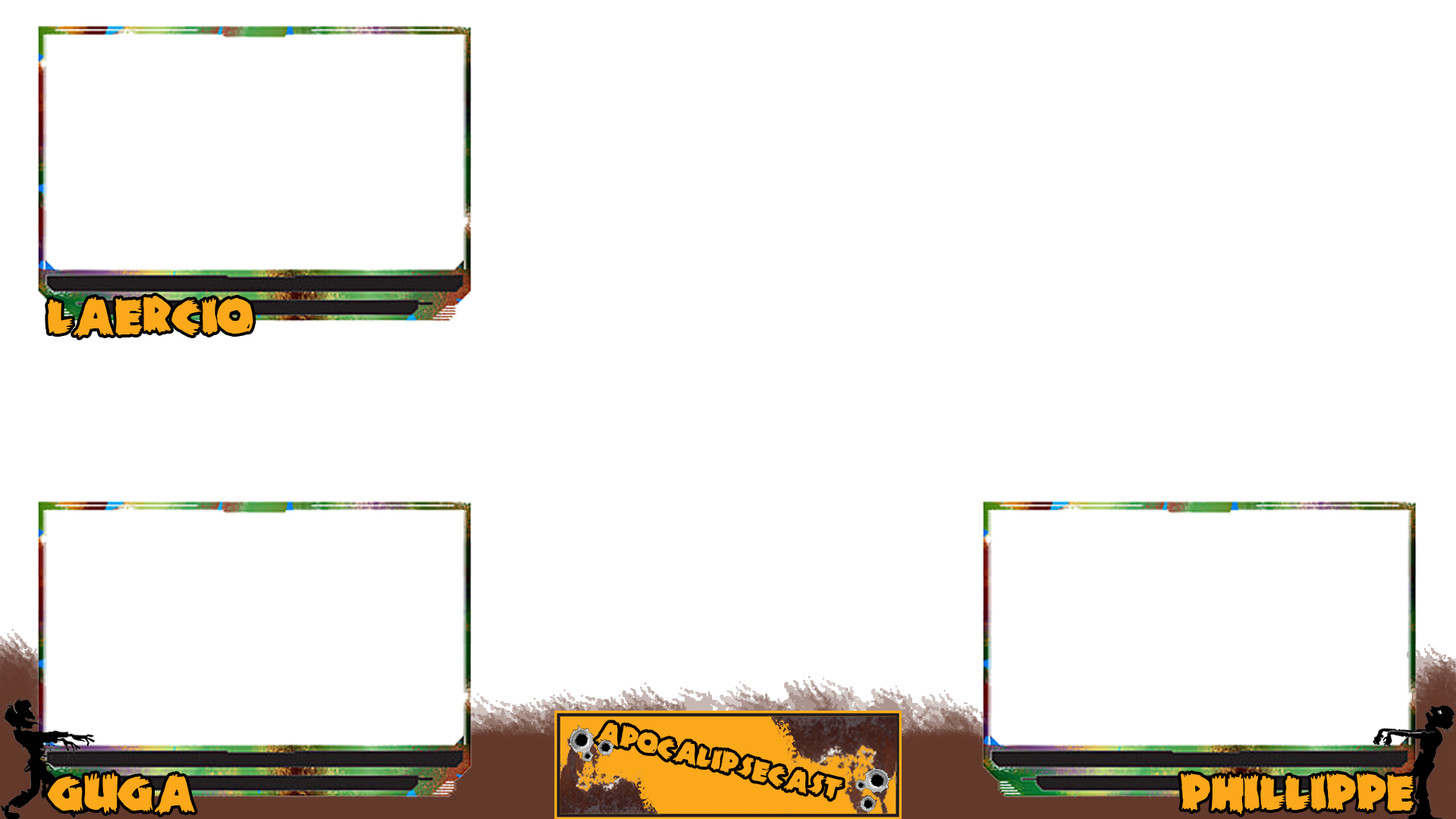
<style>
.page{position:relative;width:1456px;height:819px;background:#ffffff}
.page>*{position:absolute;margin:0}
.t1{font:56.9px "ZombieA";color:#fba81a}
</style>
<div class="page">
<p class="t1" style="left:48px;top:296px;width:205px;height:41px">Laercio</p>
<p class="t1" style="left:47px;top:773px;width:148px;height:41px">Guga</p>
<p class="t1" style="left:1181px;top:773px;width:233px;height:41px">PhilLippe</p>
</div>
